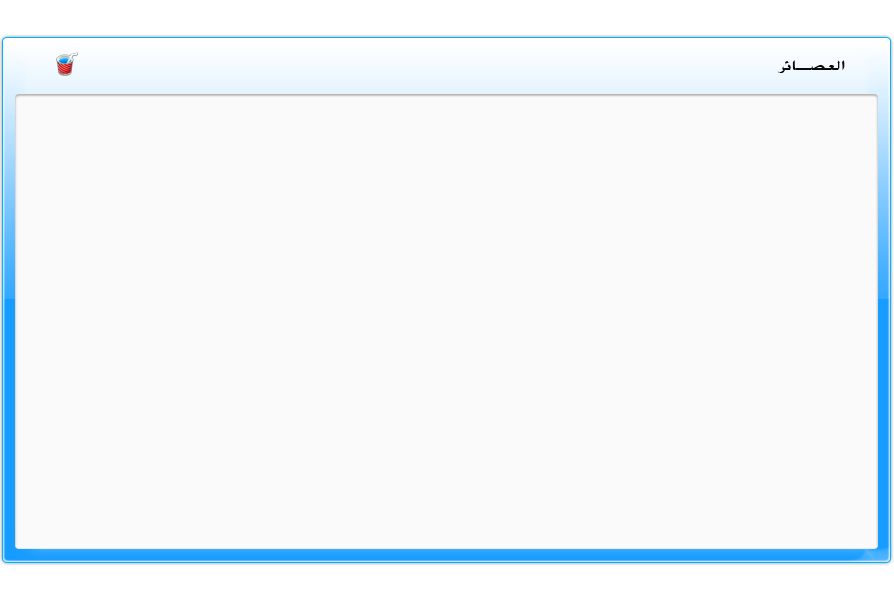
<style>
.page{position:relative;width:894px;height:600px;background:#fafafa}
.page>*{position:absolute;margin:0}
.t1{font:14.9px "BoutrosAdsMedium";color:#0c0b0b;scale:1.13 1}
</style>
<div class="page">
<p class="t1" style="left:777px;top:60px;width:68px;height:13px">العصـائر</p>
</div>
